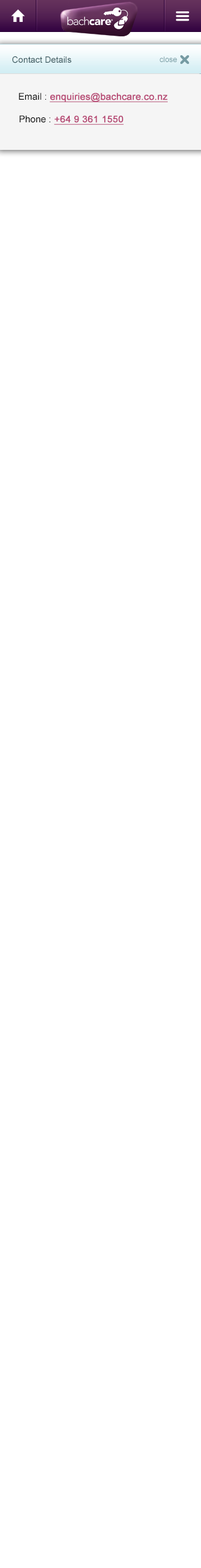
<style>
.page{position:relative;width:201px;height:1568px;background:#ffffff}
.page>*{position:absolute;margin:0}
.t1{font:8.8px "ArialMT";color:#3f5c62}
.t2{font:7.5px "ArialMT";color:#769ba3}
.t3{font:9.4px "ArialMT";color:#b74773;font-weight:bold;text-decoration:underline}
.t4{font:9.4px "ArialMT";color:#000000}
.t5{font:9.4px "ArialMT";color:#b64773;font-weight:bold;text-decoration:underline}
</style>
<div class="page">
<p class="t1" style="left:12px;top:56px;width:60px;height:7px">Contact Details</p>
<p class="t2" style="left:159px;top:56px;width:18px;height:6px">close</p>
<p class="t3" style="left:19px;top:93px;width:148px;height:9px"><span class="t4">Email : </span>enquiries@bachcare.co.nz</p>
<p class="t5" style="left:19px;top:115px;width:105px;height:10px"><span class="t4">Phone : </span>+64 9 361 1550</p>
</div>
